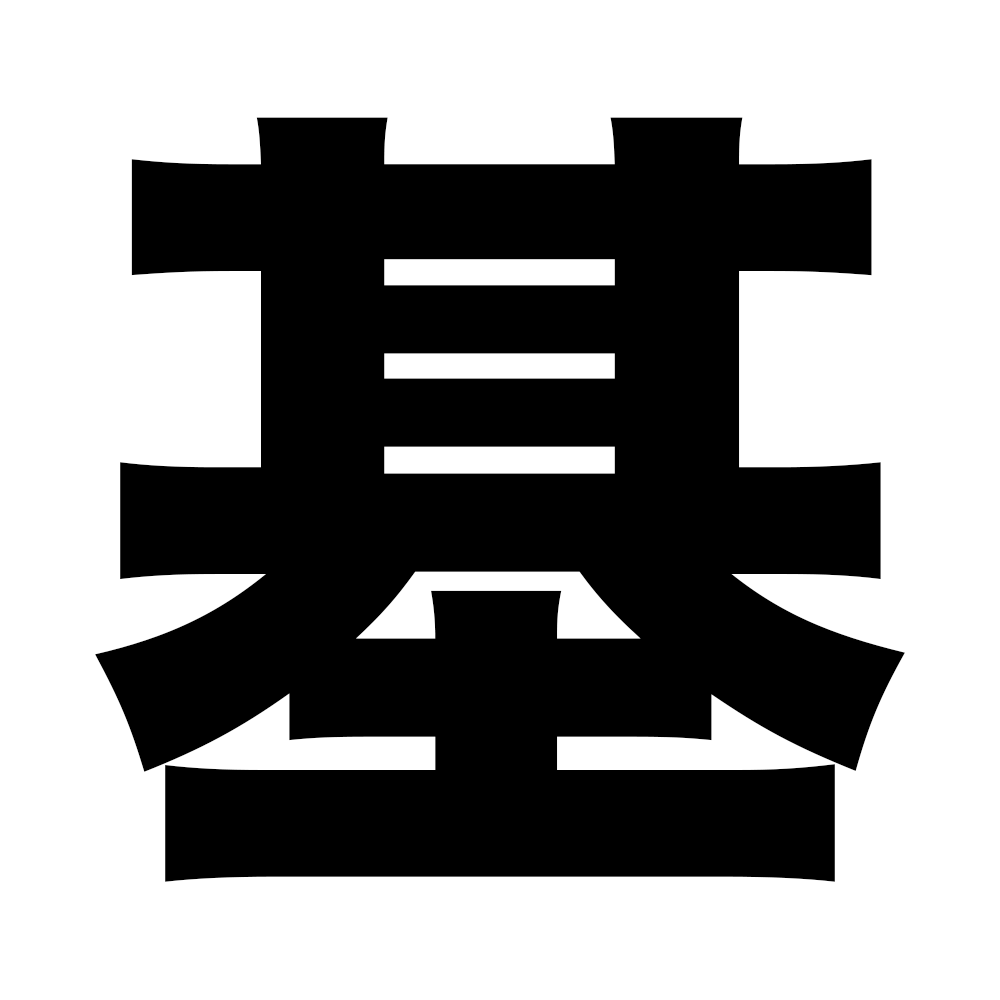
<style>
.page{position:relative;width:1000px;height:1000px;background:#ffffff}
.page>*{position:absolute;margin:0}
.t1{font:833.3px "HiraKakuStdN-W8";color:#000000}
</style>
<div class="page">
<p class="t1" style="left:95px;top:117px;width:810px;height:765px">基</p>
</div>
